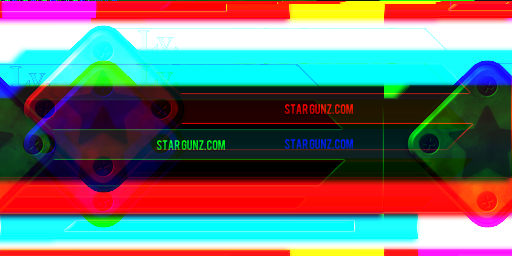
<style>
.page{position:relative;width:512px;height:256px}
.page>*{position:absolute;margin:0}
.t1{font:11px "Bebas"}
</style>
<div class="page">
<p class="t1" style="left:284px;top:103px;width:69px;height:10px">star gunz.com</p>
</div>
